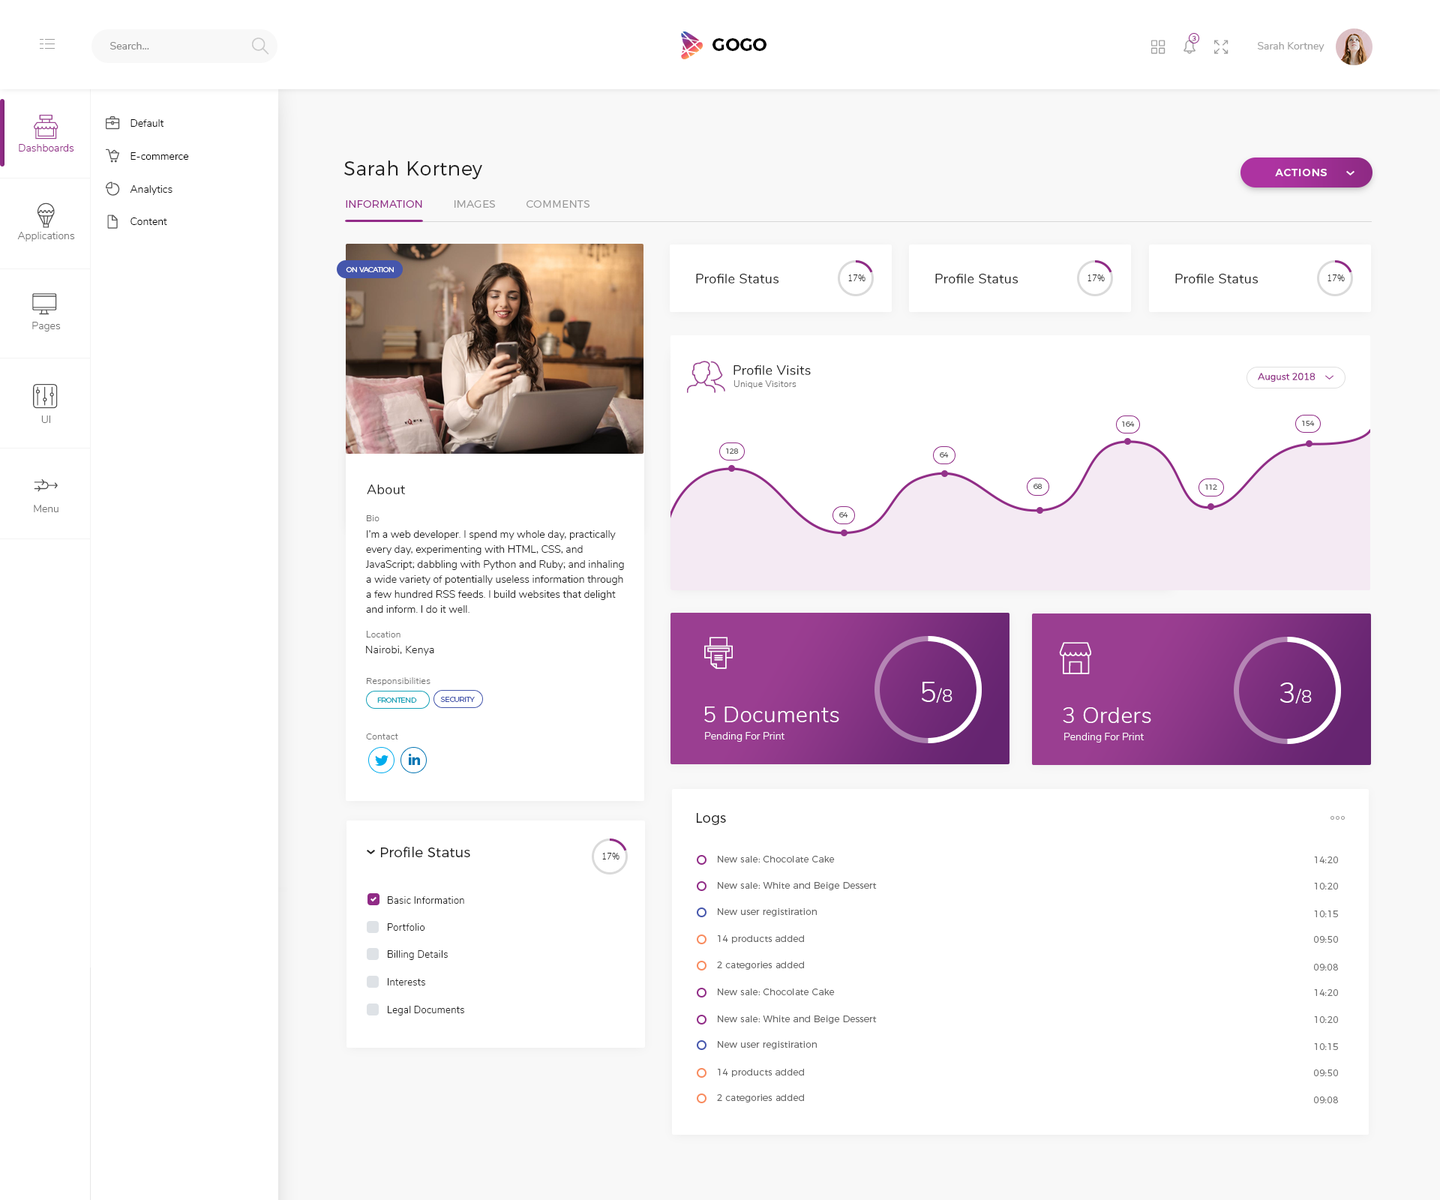
<style>
.page{position:relative;width:1440px;height:1200px;background:#ffffff}
.page>*{position:absolute;margin:0}
.t1{font:18px "Montserrat-SemiBold";color:#000000}
.t2{font:6.8px "Nunito-Regular";letter-spacing:0.02em;color:#98418f}
.t3{font:10.5px "Nunito-Regular";color:#898989}
.t4{font:10.5px "Nunito-Regular";color:#a0a0a0}
.t5{font:10.5px "Nunito-Light";color:#000000}
.t6{font:10.5px "Nunito-Light";color:#922c88}
.t7{font:19.5px "Montserrat-Light";letter-spacing:0.02em;color:#212121}
.t8{font:10.5px "Montserrat-Medium";letter-spacing:0.06em;color:#ffffff}
.t9{font:10.5px "Montserrat-Light";letter-spacing:0.02em;color:#999999}
.t10{font:10.5px "Montserrat-Light";letter-spacing:0.02em;color:#922c88}
.t11{font:10.5px "Nunito-Light";color:#737373}
.t12{font:7.5px "Montserrat-Light";letter-spacing:-0.06em;color:#ffffff}
.t13{font:13.5px "Nunito-Regular";letter-spacing:0.02em;color:#212121}
.t14{font:8.2px "Nunito-Light";letter-spacing:0.02em;color:#212121}
.t15{font:9.8px "Nunito-Regular";color:#902b86}
.t16{font:9px "Nunito-Light";letter-spacing:0.02em;color:#6e6e6e}
.t17{font:7.5px "Montserrat-Light";letter-spacing:-0.06em;color:#5f5f5f}
.t18{font:9px "Nunito-Light";letter-spacing:0.02em;color:#717171}
.t19{font:10.5px/15px "Nunito-Light";color:#212121}
.t20{font:10.5px "Nunito-Light";letter-spacing:0.02em;color:#212121}
.t21{font:18px "Nunito-Light";letter-spacing:0.02em;color:#ffffff}
.t22{font:28.5px "Nunito-Light";letter-spacing:0.02em;color:#ffffff}
.t23{font:7.5px "Montserrat-Light";letter-spacing:-0.06em;color:#17a2b8}
.t24{font:7.5px "Montserrat-Light";letter-spacing:-0.06em;color:#4556ac}
.t25{font:22.5px "Nunito-Light";letter-spacing:0.02em;color:#ffffff}
.t26{font:10.5px "Nunito-Light";color:#fefefe}
.t27{font:13.5px "Montserrat-Light";letter-spacing:0.02em;color:#212121}
.t28{font:9px "Montserrat-Light";letter-spacing:0.02em;color:#686868}
.t29{font:9px "Montserrat-Light";letter-spacing:0.02em;color:#717171}
.t30{font:9.8px "Nunito-Light";letter-spacing:0.02em;color:#212121}
</style>
<div class="page">
<p class="t1" style="left:712px;top:38px;width:54px;height:13px">GOGO</p>
<p class="t2" style="left:1192px;top:35px;width:4px;height:6px">3</p>
<p class="t3" style="left:110px;top:42px;width:39px;height:8px">Search...</p>
<p class="t4" style="left:1258px;top:42px;width:66px;height:10px">Sarah Kortney</p>
<p class="t5" style="left:130px;top:119px;width:34px;height:8px">Default</p>
<p class="t6" style="left:19px;top:144px;width:55px;height:8px">Dashboards</p>
<p class="t5" style="left:130px;top:152px;width:59px;height:8px">E-commerce</p>
<p class="t7" style="left:344px;top:160px;width:138px;height:19px">Sarah Kortney</p>
<p class="t8" style="left:1275px;top:169px;width:52px;height:7px">ACTIONS</p>
<p class="t5" style="left:130px;top:185px;width:42px;height:10px">Analytics</p>
<p class="t9" style="left:346px;top:200px;width:244px;height:8px"><span class="t10">INFORMATION        </span> IMAGES         COMMENTS</p>
<p class="t5" style="left:130px;top:218px;width:37px;height:7px">Content</p>
<p class="t11" style="left:17px;top:232px;width:58px;height:10px">Applications</p>
<p class="t12" style="left:346px;top:267px;width:48px;height:5px">ON VACATION</p>
<p class="t13" style="left:696px;top:273px;width:82px;height:11px">Profile Status</p>
<p class="t14" style="left:848px;top:274px;width:18px;height:7px">17%</p>
<p class="t13" style="left:935px;top:273px;width:83px;height:11px">Profile Status</p>
<p class="t14" style="left:1088px;top:274px;width:17px;height:7px">17%</p>
<p class="t13" style="left:1175px;top:273px;width:83px;height:11px">Profile Status</p>
<p class="t14" style="left:1328px;top:274px;width:17px;height:7px">17%</p>
<p class="t11" style="left:32px;top:322px;width:29px;height:10px">Pages</p>
<p class="t13" style="left:734px;top:364px;width:77px;height:11px">Profile Visits</p>
<p class="t15" style="left:1258px;top:373px;width:58px;height:9px">August 2018</p>
<p class="t16" style="left:734px;top:380px;width:62px;height:8px">Unique Visitors</p>
<p class="t11" style="left:41px;top:416px;width:9px;height:7px">UI</p>
<p class="t17" style="left:1122px;top:422px;width:13px;height:5px">164</p>
<p class="t17" style="left:1302px;top:421px;width:13px;height:5px">154</p>
<p class="t17" style="left:726px;top:448px;width:13px;height:6px">128</p>
<p class="t17" style="left:940px;top:452px;width:9px;height:6px">64</p>
<p class="t13" style="left:367px;top:484px;width:38px;height:10px">About</p>
<p class="t17" style="left:1034px;top:484px;width:8px;height:5px">68</p>
<p class="t17" style="left:1205px;top:484px;width:12px;height:6px">112</p>
<p class="t11" style="left:34px;top:505px;width:24px;height:7px">Menu</p>
<p class="t18" style="left:367px;top:515px;width:13px;height:6px">Bio</p>
<p class="t17" style="left:839px;top:512px;width:9px;height:6px">64</p>
<p class="t19" style="left:365px;top:530px;width:259px;height:83px">I’m a web developer. I spend my whole day, practically every day, experimenting with HTML, CSS, and JavaScript; dabbling with Python and Ruby; and inhaling a wide variety of potentially useless information through a few hundred RSS feeds. I build websites that delight and inform. I do it well.</p>
<p class="t18" style="left:367px;top:631px;width:33px;height:7px">Location</p>
<p class="t20" style="left:366px;top:646px;width:68px;height:10px">Nairobi, Kenya</p>
<p class="t18" style="left:367px;top:677px;width:63px;height:9px">Responsibilities</p>
<p class="t21" style="left:922px;top:682px;width:30px;height:21px"><span class="t22">5</span>/8</p>
<p class="t21" style="left:1280px;top:682px;width:32px;height:22px"><span class="t22">3</span>/8</p>
<p class="t23" style="left:377px;top:698px;width:40px;height:5px">FRONTEND</p>
<p class="t24" style="left:440px;top:697px;width:35px;height:5px">SECURITY</p>
<p class="t25" style="left:704px;top:706px;width:135px;height:16px">5 Documents</p>
<p class="t25" style="left:1063px;top:707px;width:88px;height:16px">3 Orders</p>
<p class="t18" style="left:366px;top:734px;width:32px;height:6px">Contact</p>
<p class="t26" style="left:705px;top:732px;width:80px;height:10px">Pending For Print</p>
<p class="t26" style="left:1064px;top:733px;width:80px;height:9px">Pending For Print</p>
<p class="t27" style="left:697px;top:813px;width:29px;height:12px">Logs</p>
<p class="t27" style="left:381px;top:847px;width:89px;height:10px">Profile Status</p>
<p class="t14" style="left:602px;top:853px;width:18px;height:7px">17%</p>
<p class="t28" style="left:718px;top:856px;width:117px;height:6px">New sale: Chocolate Cake</p>
<p class="t29" style="left:1314px;top:856px;width:24px;height:7px">14:20</p>
<p class="t28" style="left:718px;top:882px;width:159px;height:8px">New sale: White and Beige Dessert</p>
<p class="t29" style="left:1314px;top:883px;width:24px;height:7px">10:20</p>
<p class="t30" style="left:388px;top:896px;width:76px;height:8px">Basic Information</p>
<p class="t28" style="left:718px;top:908px;width:99px;height:8px">New user registiration</p>
<p class="t29" style="left:1314px;top:910px;width:24px;height:7px">10:15</p>
<p class="t30" style="left:388px;top:923px;width:37px;height:8px">Portfolio</p>
<p class="t28" style="left:718px;top:935px;width:86px;height:9px">14 products added</p>
<p class="t29" style="left:1314px;top:936px;width:24px;height:7px">09:50</p>
<p class="t30" style="left:388px;top:950px;width:60px;height:10px">Billing Details</p>
<p class="t28" style="left:717px;top:962px;width:87px;height:8px">2 categories added</p>
<p class="t29" style="left:1314px;top:964px;width:24px;height:6px">09:08</p>
<p class="t30" style="left:388px;top:978px;width:37px;height:8px">Interests</p>
<p class="t28" style="left:718px;top:988px;width:117px;height:7px">New sale: Chocolate Cake</p>
<p class="t29" style="left:1314px;top:989px;width:24px;height:7px">14:20</p>
<p class="t30" style="left:388px;top:1006px;width:76px;height:10px">Legal Documents</p>
<p class="t28" style="left:718px;top:1016px;width:159px;height:8px">New sale: White and Beige Dessert</p>
<p class="t29" style="left:1314px;top:1016px;width:24px;height:7px">10:20</p>
<p class="t28" style="left:718px;top:1041px;width:99px;height:8px">New user registiration</p>
<p class="t29" style="left:1314px;top:1043px;width:24px;height:7px">10:15</p>
<p class="t28" style="left:718px;top:1069px;width:86px;height:8px">14 products added</p>
<p class="t29" style="left:1314px;top:1070px;width:24px;height:6px">09:50</p>
<p class="t28" style="left:717px;top:1094px;width:87px;height:8px">2 categories added</p>
<p class="t29" style="left:1314px;top:1096px;width:24px;height:7px">09:08</p>
</div>
